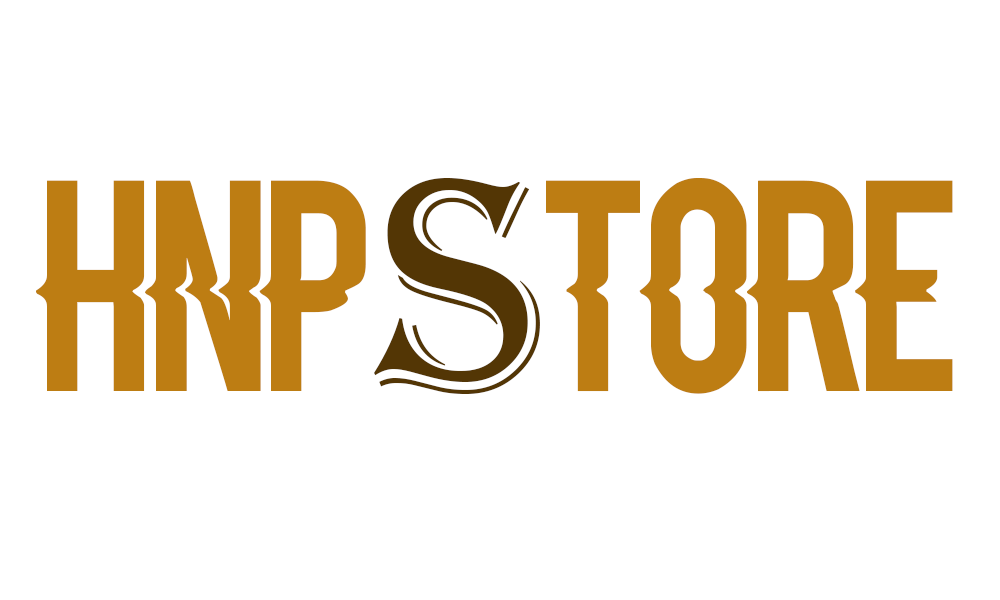
<style>
.page{position:relative;width:1000px;height:600px;background:#ffffff}
.page>*{position:absolute;margin:0}
.t1{font:204.2px "Blacklisted";letter-spacing:0.01em;color:#bd7d13;scale:0.95 1}
.t2{font:315.3px "Algerian";letter-spacing:0.01em;color:#533605;scale:0.95 1}
</style>
<div class="page">
<p class="t1" style="left:36px;top:178px;width:917px;height:216px">hNP<span class="t2">S</span>TORE</p>
</div>
